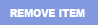
<style>
.page{position:relative;width:98px;height:25px;background:#8299df}
.page>*{position:absolute;margin:0}
.t1{font:18.2px "Arial-Black";color:#ffffff;scale:0.9 1}
</style>
<div class="page">
<p class="t1" style="left:10px;top:9px;width:75px;height:8px">REMOVE ITEM</p>
</div>
